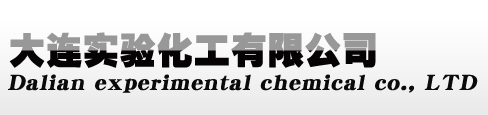
<style>
.page{position:relative;width:488px;height:115px}
.page>*{position:absolute;margin:0}
.t1{font:36px "HeitiEG-Ultra-GB";font-weight:bold}
.t2{font:24px "DFPSongW9";color:#0a0a0a;font-weight:bold;font-style:italic}
</style>
<div class="page">
<p class="t1" style="left:9px;top:32px;width:367px;height:36px">大连实验化工有限公司</p>
<p class="t2" style="left:8px;top:74px;width:470px;height:19px">Dalian experimental chemical co., LTD</p>
</div>
